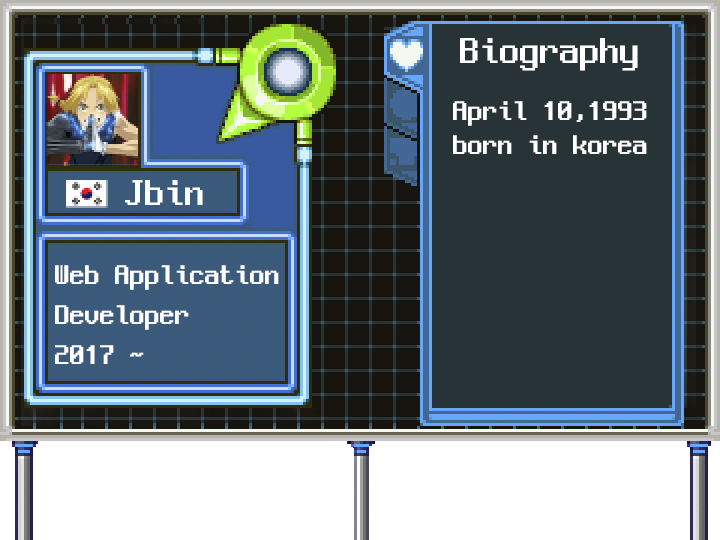
<style>
.page{position:relative;width:720px;height:540px}
.page>*{position:absolute;margin:0}
.t1{font:40px "NeoDunggeunmo-Regular";color:#ffffff}
.t2{font:30px/34px "NeoDunggeunmo-Regular";color:#ffffff}
.t3{font:30px/40px "NeoDunggeunmo-Regular";color:#ffffff}
</style>
<div class="page">
<p class="t1" style="left:460px;top:38px;width:178px;height:33px">Biography</p>
<p class="t2" style="left:453px;top:101px;width:194px;height:53px">April 10,1993 <br>born in korea</p>
<p class="t1" style="left:125px;top:180px;width:78px;height:25px">Jbin</p>
<p class="t3" style="left:55px;top:265px;width:224px;height:99px">Web Application<br>Developer<br>2017 ~</p>
</div>
